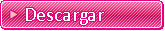
<style>
.page{position:relative;width:165px;height:31px}
.page>*{position:absolute;margin:0}
.t1{font:20px "Calibri";color:#ffffff}
</style>
<div class="page">
<p class="t1" style="left:26px;top:8px;width:78px;height:17px">Descargar</p>
</div>
